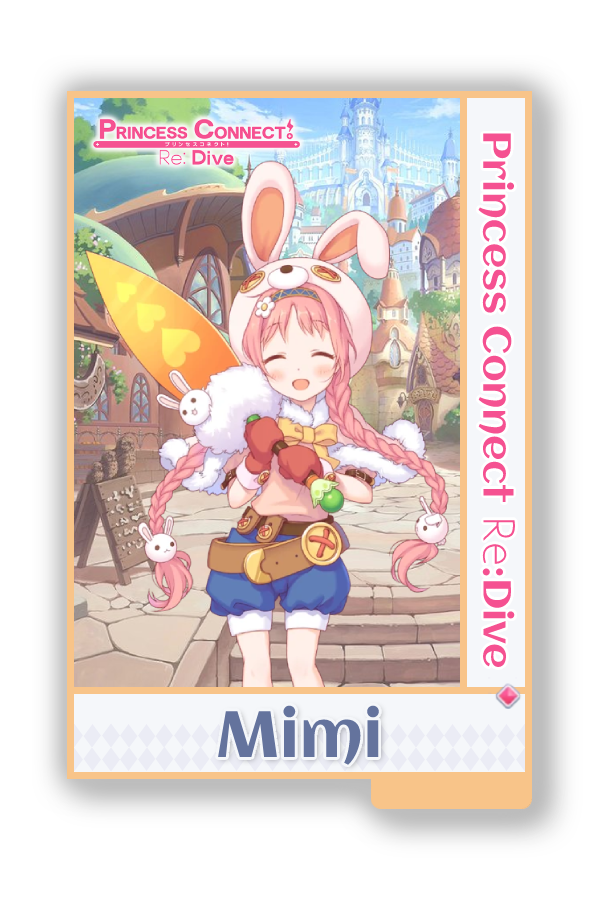
<style>
.page{position:relative;width:600px;height:900px;background:#ffffff}
.page>*{position:absolute;margin:0}
.t1{font:39px "Aclonica-Regular";color:#f55191}
.t2{font:39px "AaarghNormal";color:#f55191}
.t3{font:65px "Aclonica-Regular";color:#64739d}
</style>
<div class="page">
<p class="t1" style="left:478px;top:133px;width:38px;height:534px;rotate:90deg">Princess Connect <span class="t2">Re</span>:Dive</p>
<p class="t3" style="left:218px;top:705px;width:161px;height:60px">Mimi</p>
</div>
